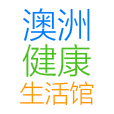
<style>
.page{position:relative;width:114px;height:114px;background:#ffffff}
.page>*{position:absolute;margin:0}
.t1{font:25px/29px "FZLTXHK--GBK1-0";color:#ff9501}
.t2{font:35px/58px "FZLTXHK--GBK1-0";color:#007aff}
.t3{font:35px/36.3px "FZLTXHK--GBK1-0";color:#49bf1f}
</style>
<div class="page">
<p class="t1" style="left:20px;top:8px;width:74px;height:98px;text-align:center"><span class="t2">澳洲<br></span><span class="t3">健康<br></span>生活馆</p>
</div>
